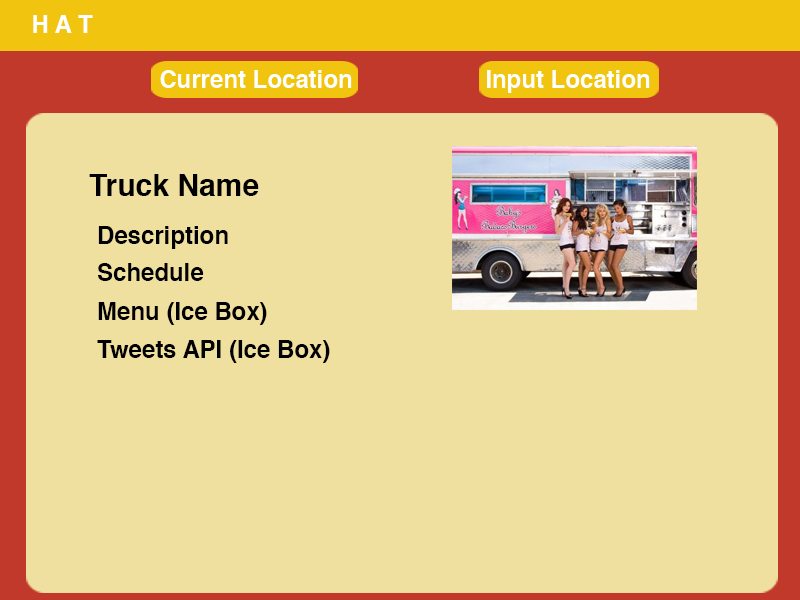
<style>
.page{position:relative;width:800px;height:600px;background:#f0e09f}
.page>*{position:absolute;margin:0}
.t1{font:24px "Helvetica-Bold";color:#ffffff}
.t2{font:30px "Helvetica-Bold";color:#000000}
.t3{font:24px "Helvetica-Bold";color:#000000}
</style>
<div class="page">
<p class="t1" style="left:33px;top:15px;width:60px;height:18px">H A T</p>
<p class="t2" style="left:89px;top:174px;width:170px;height:22px">Truck Name</p>
<p class="t3" style="left:98px;top:226px;width:130px;height:23px">Description</p>
<p class="t3" style="left:98px;top:263px;width:106px;height:18px">Schedule</p>
<p class="t3" style="left:98px;top:302px;width:169px;height:23px">Menu (Ice Box)</p>
<p class="t3" style="left:97px;top:340px;width:233px;height:23px">Tweets API (Ice Box)</p>
</div>
